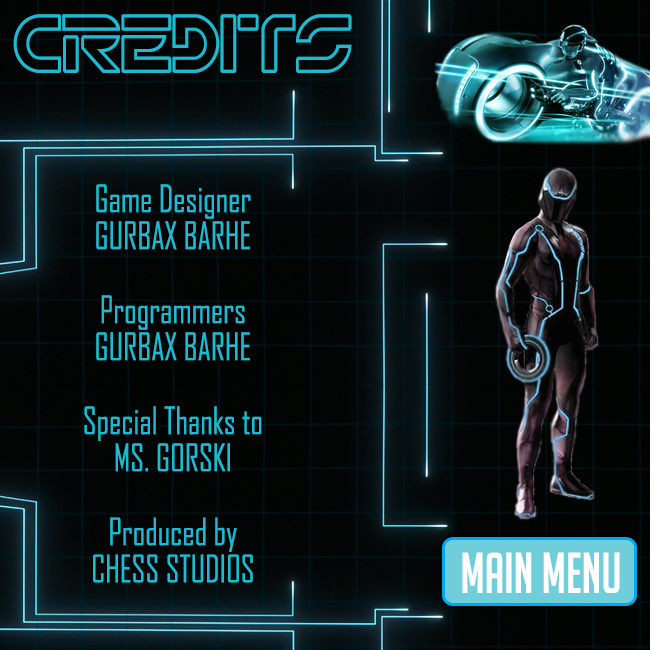
<style>
.page{position:relative;width:650px;height:650px}
.page>*{position:absolute;margin:0}
.t1{font:83.6px "TRN";color:#1fb9d1;scale:0.91 1}
.t2{font:36.3px/37px "AgencyFB-Reg";color:#1fb9d1;scale:0.91 1}
</style>
<div class="page">
<p class="t1" style="left:13px;top:14px;width:339px;height:59px">CREDITS</p>
<p class="t2" style="left:84px;top:184px;width:178px;height:399px;text-align:center">Game Designer<br>GURBAX BARHE<br><br>Programmers<br>GURBAX BARHE<br><br>Special Thanks to<br>MS. GORSKI<br><br>Produced by<br>CHESS STUDIOS</p>
</div>
